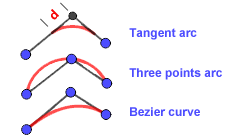
<style>
.page{position:relative;width:245px;height:140px;background:#ffffff}
.page>*{position:absolute;margin:0}
.t1{font:12px "MicrosoftYaHei-Bold";color:#f60505}
.t2{font:12px "Arial-BoldMT";color:#4d4dff}
</style>
<div class="page">
<p class="t1" style="left:51px;top:9px;width:8px;height:11px;rotate:-45deg">d</p>
<p class="t2" style="left:129px;top:28px;width:68px;height:12px">Tangent arc</p>
<p class="t2" style="left:129px;top:68px;width:93px;height:12px">Three points arc</p>
<p class="t2" style="left:130px;top:107px;width:70px;height:9px">Bezier curve</p>
</div>
